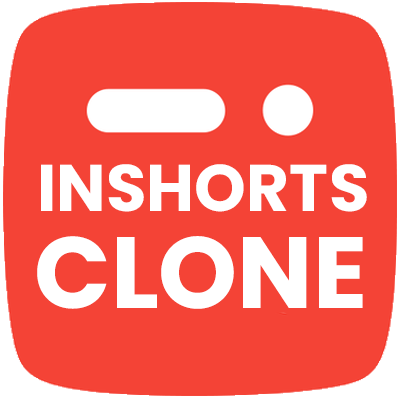
<style>
.page{position:relative;width:400px;height:400px;background:#f44336}
.page>*{position:absolute;margin:0}
.t1{font:65.8px "Poppins-Bold";color:#ffffff}
.t2{font:100.8px "Poppins-Bold";color:#ffffff}
</style>
<div class="page">
<p class="t1" style="left:41px;top:164px;width:326px;height:48px">INSHORTS</p>
<p class="t2" style="left:37px;top:236px;width:326px;height:73px">CLONE</p>
</div>
